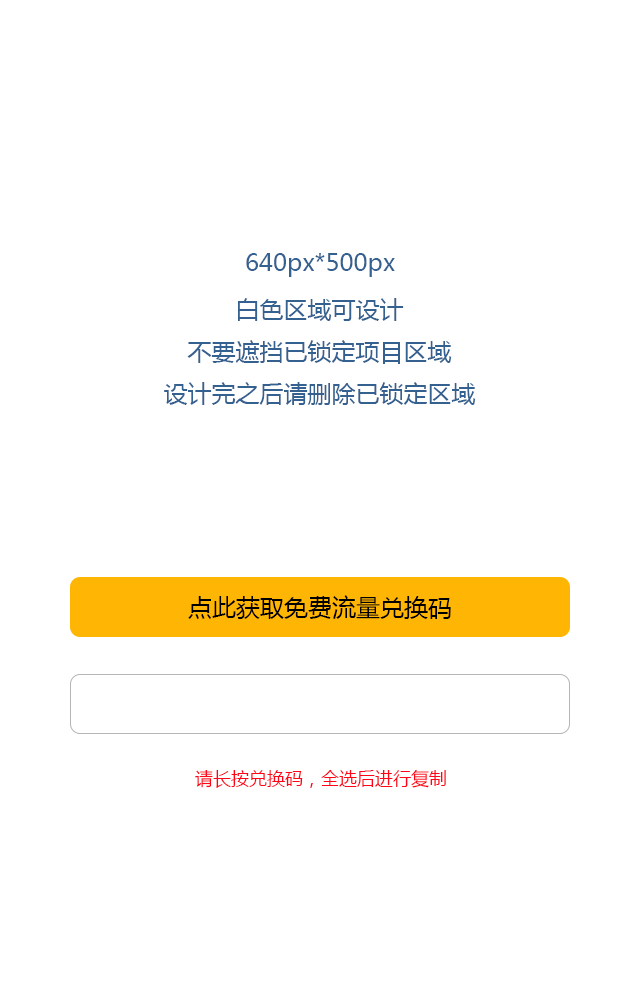
<style>
.page{position:relative;width:640px;height:1008px;background:#ffffff}
.page>*{position:absolute;margin:0}
.t1{font:24px "MicrosoftYaHei";color:#356190}
.t2{font:24px "MicrosoftYaHei";color:#000000}
.t3{font:18px "MicrosoftYaHei";color:#fe0517}
</style>
<div class="page">
<p class="t1" style="left:246px;top:253px;width:149px;height:24px">640px*500px</p>
<p class="t1" style="left:164px;top:298px;width:312px;height:107px;text-align:center">白色区域可设计<br>不要遮挡已锁定项目区域<br>设计完之后请删除已锁定区域</p>
<p class="t2" style="left:188px;top:595px;width:263px;height:24px">点此获取免费流量兑换码</p>
<p class="t3" style="left:195px;top:769px;width:251px;height:19px">请长按兑换码，全选后进行复制</p>
</div>
